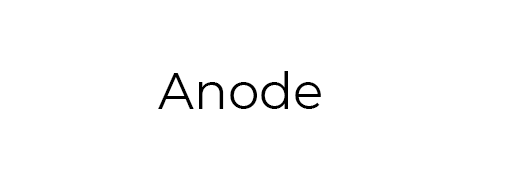
<style>
.page{position:relative;width:526px;height:180px;background:#ffffff}
.page>*{position:absolute;margin:0}
.t1{font:50px "Montserrat-Regular";color:#000000}
</style>
<div class="page">
<p class="t1" style="left:158px;top:71px;width:163px;height:38px">Anode</p>
</div>
